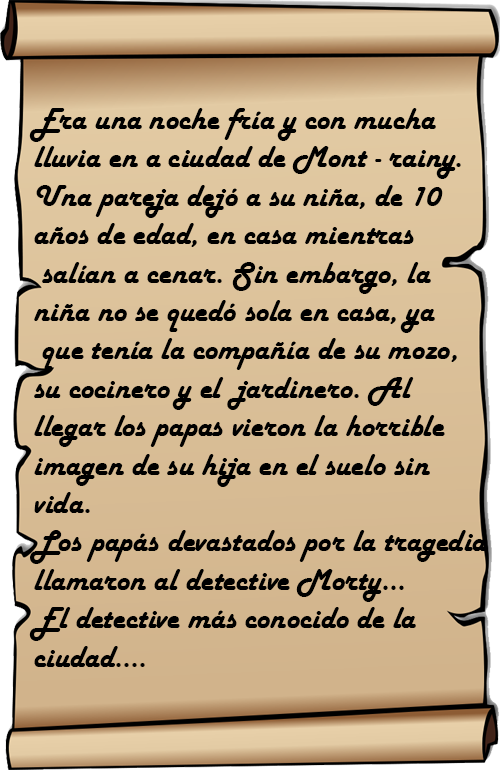
<style>
.page{position:relative;width:500px;height:770px}
.page>*{position:absolute;margin:0}
.t1{font:32px "HarlowSolid";color:#000000}
</style>
<div class="page">
<p class="t1" style="left:29px;top:108px;width:458px;height:559px">Era una noche fría y con mucha <br>lluvia en a ciudad de Mont - rainy. <br>Una pareja dejó a su niña, de 10 <br>años de edad, en casa mientras<br> salían a cenar. Sin embargo, la <br>niña no se quedó sola en casa, ya<br> que tenía la compañía de su mozo, <br>su cocinero y el  jardinero. Al <br>llegar los papas vieron la horrible <br>imagen de su hija en el suelo sin <br>vida. <br>Los papás devastados por la tragedia <br>llamaron al detective Morty… <br>El detective más conocido de la <br>ciudad....</p>
</div>
